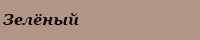
<style>
.page{position:relative;width:200px;height:40px;background:#b29685}
.page>*{position:absolute;margin:0}
.t1{font:16px "Georgia-BoldItalic";color:#070707}
</style>
<div class="page">
<p class="t1" style="left:3px;top:13px;width:76px;height:12px">Зелёный</p>
</div>
